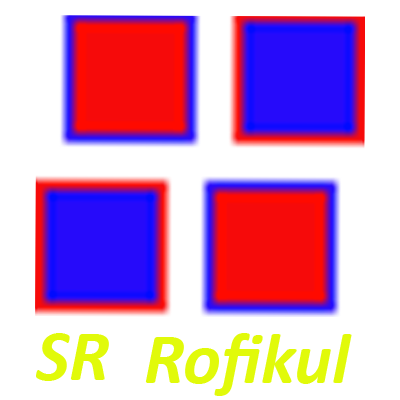
<style>
.page{position:relative;width:400px;height:400px;background:#ffffff}
.page>*{position:absolute;margin:0}
.t1{font:72px "Calibri-BoldItalic";color:#e1fa0a}
</style>
<div class="page">
<p class="t1" style="left:36px;top:333px;width:73px;height:48px">SR</p>
<p class="t1" style="left:145px;top:333px;width:207px;height:63px">Rofikul</p>
</div>
